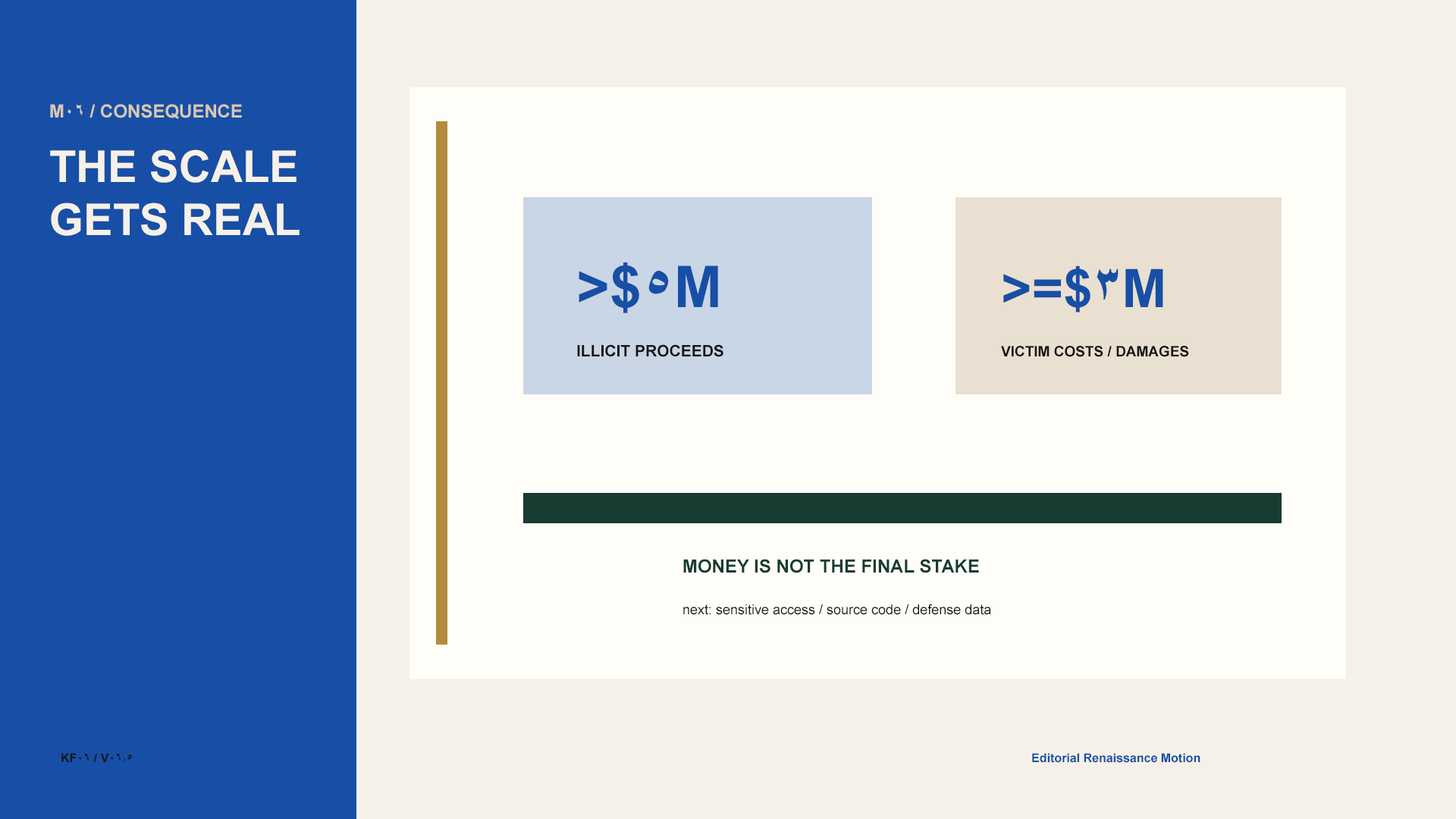
<style>
.page{position:relative;width:1456px;height:819px;background:#fffdf8}
.page>*{position:absolute;margin:0}
.t1{font:18.2px "Arial-BoldMT";color:#d9c8b1}
.t2{font:44px "Arial-BoldMT";color:#f6f1e8}
.t3{font:57.6px "Arial-BoldMT";color:#174fa6}
.t4{font:53.1px "Arial-BoldMT";color:#174fa6}
.t5{font:15.9px "Arial-BoldMT";color:#151515}
.t6{font:14.4px "Arial-BoldMT";color:#151515}
.t7{font:18.2px "Arial-BoldMT";color:#173c32}
.t8{font:13.6px "ArialMT";color:#151515}
.t9{font:12.1px "Arial-BoldMT";color:#151515}
.t10{font:12.1px "Arial-BoldMT";color:#174fa6}
</style>
<div class="page">
<p class="t1" style="left:50px;top:104px;width:192px;height:15px">M06 / CONSEQUENCE</p>
<p class="t2" style="left:50px;top:149px;width:247px;height:34px">THE SCALE</p>
<p class="t2" style="left:51px;top:202px;width:249px;height:34px">GETS REAL</p>
<p class="t3" style="left:579px;top:262px;width:139px;height:51px">&gt;$5M</p>
<p class="t4" style="left:1003px;top:265px;width:160px;height:47px">&gt;=$3M</p>
<p class="t5" style="left:577px;top:344px;width:146px;height:13px">ILLICIT PROCEEDS</p>
<p class="t6" style="left:1001px;top:346px;width:188px;height:11px">VICTIM COSTS / DAMAGES</p>
<p class="t7" style="left:683px;top:559px;width:296px;height:14px">MONEY IS NOT THE FINAL STAKE</p>
<p class="t8" style="left:683px;top:604px;width:308px;height:11px">next: sensitive access / source code / defense data</p>
<p class="t9" style="left:61px;top:753px;width:71px;height:9px">KF06 / V06.5</p>
<p class="t10" style="left:1032px;top:753px;width:168px;height:10px">Editorial Renaissance Motion</p>
</div>
